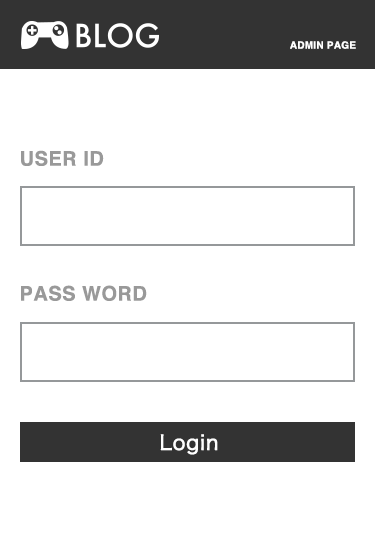
<style>
.page{position:relative;width:375px;height:537px;background:#ffffff}
.page>*{position:absolute;margin:0}
.t1{font:10px "Helvetica-Bold";letter-spacing:0.025em;color:#ffffff;text-transform:uppercase}
.t2{font:20px "Helvetica-Bold";letter-spacing:0.025em;color:#999999;text-transform:uppercase}
.t3{font:20px "HiraKakuProN-W3";letter-spacing:0.025em;color:#ffffff;font-weight:bold}
</style>
<div class="page">
<p class="t1" style="left:290px;top:41px;width:66px;height:8px">Admin page</p>
<p class="t2" style="left:21px;top:150px;width:83px;height:16px">User ID</p>
<p class="t2" style="left:21px;top:285px;width:126px;height:16px">Pass word</p>
<p class="t3" style="left:160px;top:434px;width:58px;height:21px">Login</p>
</div>
